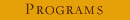
<style>
.page{position:relative;width:130px;height:20px;background:#e6a109}
.page>*{position:absolute;margin:0}
.t1{font:12.5px "Garamond";color:#4c290d}
.t2{font:16.7px "Garamond";color:#4c290d}
</style>
<div class="page">
<p class="t1" style="left:25px;top:3px;width:78px;height:12px"><span class="t2">P  </span>R O G R A M S</p>
</div>
